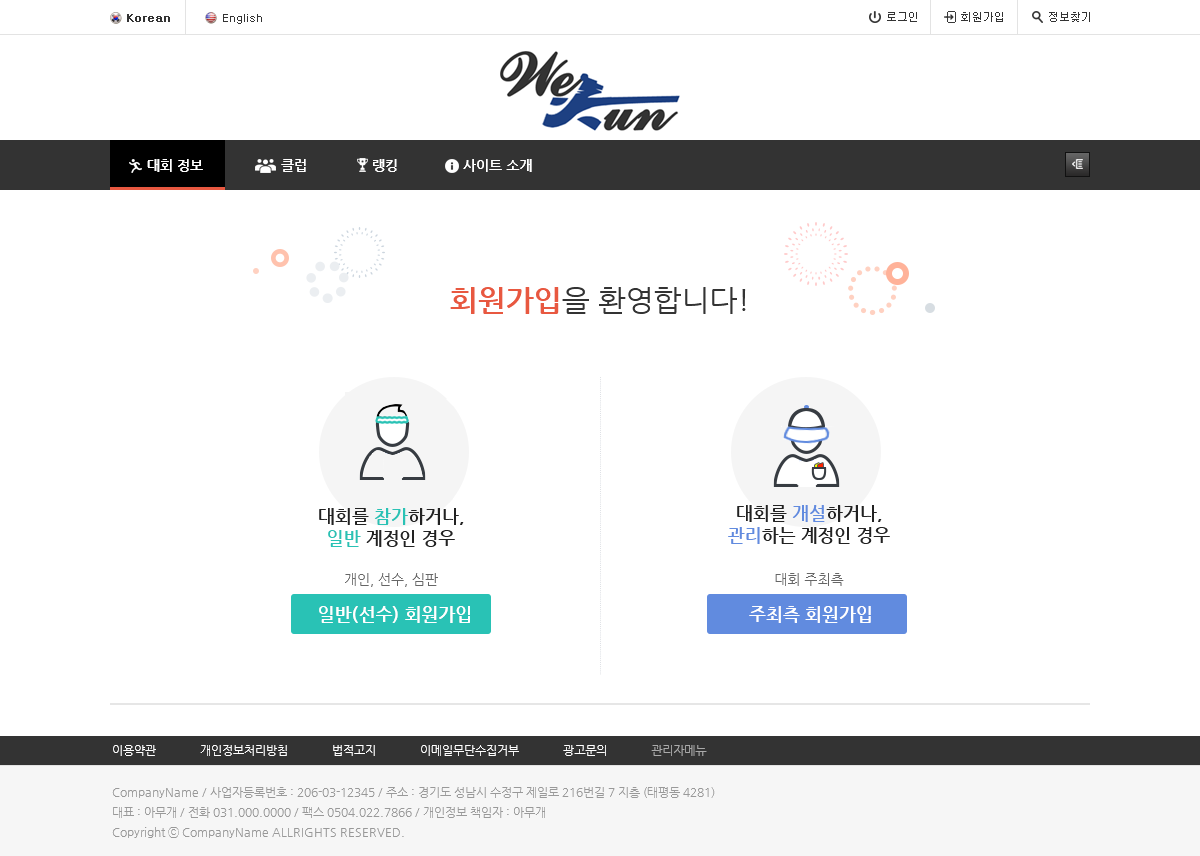
<style>
.page{position:relative;width:1200px;height:856px;background:#ffffff}
.page>*{position:absolute;margin:0}
.t1{font:11px "Dotum";color:#333333;font-weight:bold}
.t2{font:11px "Dotum";color:#333333}
.t3{font:14px "NanumGothicBold";color:#ffffff}
.t4{font:30px "NanumGothic";color:#333333}
.t5{font:30px "NanumGothicBold";color:#e85840}
.t6{font:18px "NanumGothicBold";color:#222222}
.t7{font:18px "NanumGothicBold";color:#29c2b5}
.t8{font:18px "NanumGothicBold";color:#618bdf}
.t9{font:14px "NanumGothic";color:#666666}
.t10{font:18px "NanumGothicBold";color:#ffffff}
.t11{font:12px "NanumGothic";color:#ffffff}
.t12{font:12px "NanumGothic";color:#aaaaaa}
.t13{font:12px/20px "NanumGothic";color:#999999}
</style>
<div class="page">
<p class="t1" style="left:127px;top:14px;width:43px;height:8px">Korean</p>
<p class="t2" style="left:223px;top:14px;width:39px;height:10px">English</p>
<p class="t2" style="left:887px;top:12px;width:30px;height:10px">로그인</p>
<p class="t2" style="left:961px;top:12px;width:42px;height:10px">회원가입</p>
<p class="t2" style="left:1049px;top:12px;width:41px;height:10px">정보찾기</p>
<p class="t3" style="left:147px;top:159px;width:385px;height:13px">대회 정보　　　　　　클럽　　　　　랭킹　　　　　사이트 소개</p>
<p class="t4" style="left:450px;top:287px;width:296px;height:27px"><span class="t5">회원가입</span>을 환영합니다!</p>
<p class="t6" style="left:319px;top:508px;width:145px;height:39px;text-align:center">대회를 <span class="t7">참가</span>하거나,<br><span class="t7">일반</span> 계정인 경우</p>
<p class="t6" style="left:728px;top:505px;width:162px;height:39px;text-align:center">대회를 <span class="t8">개설</span>하거나,<br><span class="t8">관리</span>하는 계정인 경우</p>
<p class="t9" style="left:345px;top:573px;width:93px;height:14px">개인, 선수, 심판</p>
<p class="t9" style="left:775px;top:573px;width:69px;height:13px">대회 주최측</p>
<p class="t10" style="left:319px;top:606px;width:151px;height:17px">일반(선수) 회원가입</p>
<p class="t10" style="left:749px;top:606px;width:122px;height:17px">주최측 회원가입</p>
<p class="t11" style="left:113px;top:745px;width:594px;height:11px">이용약관　　　　개인정보처리방침　　　　법적고지　　　　이메일무단수집거부　　　　광고문의　　　　<span class="t12">관리자메뉴</span></p>
<p class="t13" style="left:112px;top:787px;width:603px;height:51px">CompanyName / 사업자등록번호 : 206-03-12345 / 주소 : 경기도 성남시 수정구 제일로 216번길 7 지층 (태평동 4281)<br>대표 : 아무개 / 전화 031.000.0000 / 팩스 0504.022.7866 / 개인정보 책임자 : 아무개<br>Copyright ⓒ CompanyName ALLRIGHTS RESERVED.</p>
</div>
